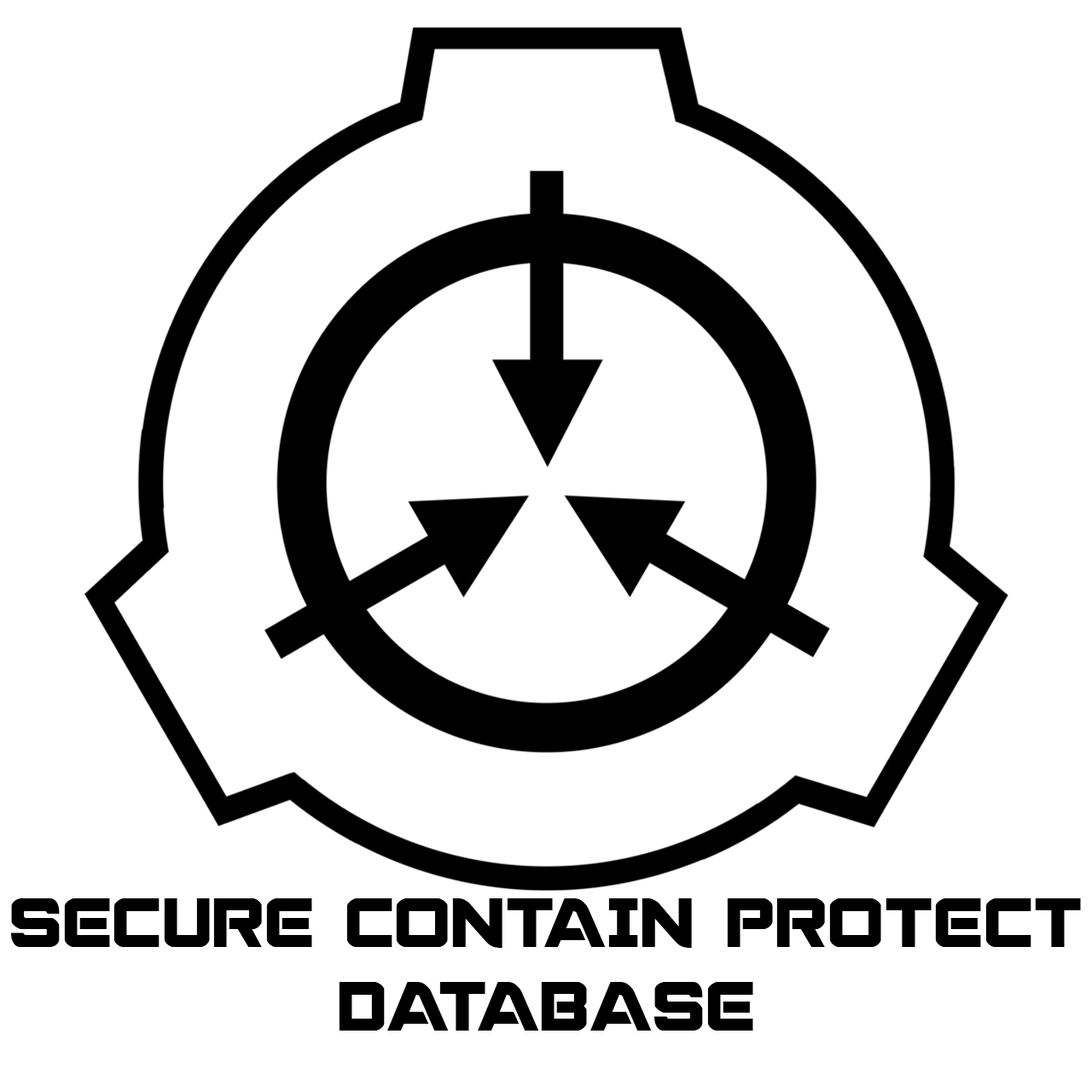
<style>
.page{position:relative;width:1092px;height:1092px;background:#ffffff}
.page>*{position:absolute;margin:0}
.t1{font:69.1px "Praetorian";color:#000000}
</style>
<div class="page">
<p class="t1" style="left:10px;top:898px;width:1071px;height:133px;text-align:center">SECURE CONTAIN PROTECT<br>DATABASE</p>
</div>
